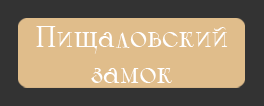
<style>
.page{position:relative;width:264px;height:106px;background:#e0bd8b}
.page>*{position:absolute;margin:0}
.t1{font:30px "Calypso-Regular";color:#ffffff}
</style>
<div class="page">
<p class="t1" style="left:36px;top:26px;width:192px;height:57px;text-align:center">Пищаловский<br>замок</p>
</div>
